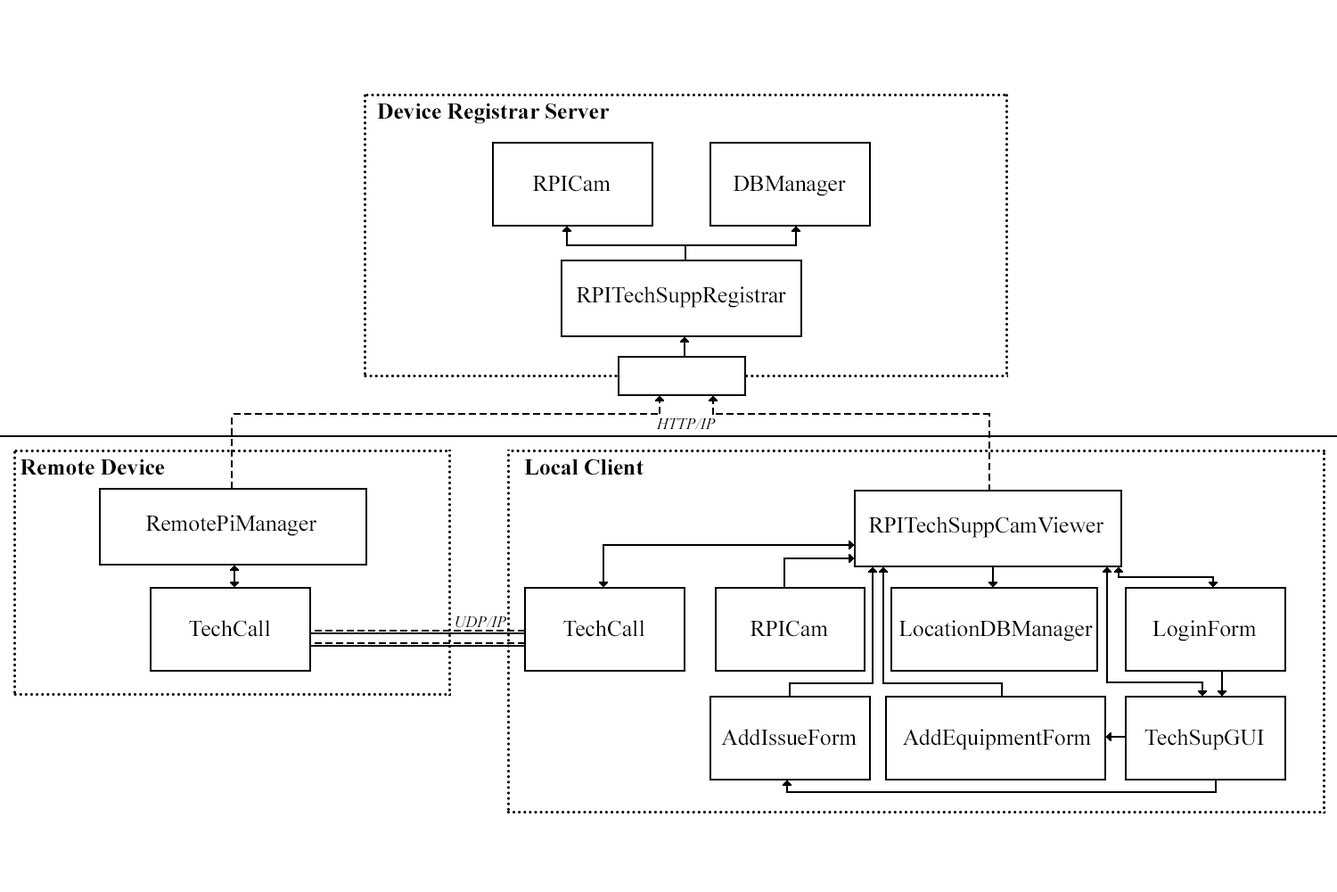
<style>
.page{position:relative;width:1337px;height:892px;background:#ffffff}
.page>*{position:absolute;margin:0}
.t1{font:22.8px "TimesNewRomanPS-BoldMT";color:#000000}
.t2{font:22.8px "TimesNewRomanPSMT";color:#000000}
.t3{font:16px "TimesNewRomanPS-ItalicMT";color:#000000}
</style>
<div class="page">
<p class="t1" style="left:377px;top:103px;width:233px;height:21px">Device Registrar Server</p>
<p class="t2" style="left:532px;top:175px;width:79px;height:17px">RPICam</p>
<p class="t2" style="left:733px;top:176px;width:113px;height:20px">DBManager</p>
<p class="t2" style="left:576px;top:286px;width:210px;height:22px">RPITechSuppRegistrar</p>
<p class="t3" style="left:656px;top:417px;width:60px;height:13px">HTTP/IP</p>
<p class="t1" style="left:20px;top:458px;width:145px;height:17px">Remote Device</p>
<p class="t1" style="left:524px;top:458px;width:120px;height:17px">Local Client</p>
<p class="t2" style="left:145px;top:514px;width:172px;height:22px">RemotePiManager</p>
<p class="t2" style="left:868px;top:516px;width:236px;height:22px">RPITechSuppCamViewer</p>
<p class="t3" style="left:456px;top:615px;width:50px;height:13px">UDP/IP</p>
<p class="t2" style="left:189px;top:620px;width:81px;height:17px">TechCall</p>
<p class="t2" style="left:563px;top:620px;width:82px;height:17px">TechCall</p>
<p class="t2" style="left:750px;top:620px;width:78px;height:17px">RPICam</p>
<p class="t2" style="left:899px;top:620px;width:194px;height:21px">LocationDBManager</p>
<p class="t2" style="left:1153px;top:620px;width:104px;height:21px">LoginForm</p>
<p class="t2" style="left:721px;top:728px;width:136px;height:17px">AddIssueForm</p>
<p class="t2" style="left:903px;top:728px;width:188px;height:22px">AddEquipmentForm</p>
<p class="t2" style="left:1145px;top:728px;width:119px;height:22px">TechSupGUI</p>
</div>
